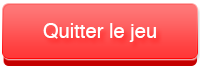
<style>
.page{position:relative;width:200px;height:68px}
.page>*{position:absolute;margin:0}
.t1{font:20.3px "Helvetica";color:#ffffff}
</style>
<div class="page">
<p class="t1" style="left:43px;top:23px;width:113px;height:19px">Quitter le jeu</p>
</div>
